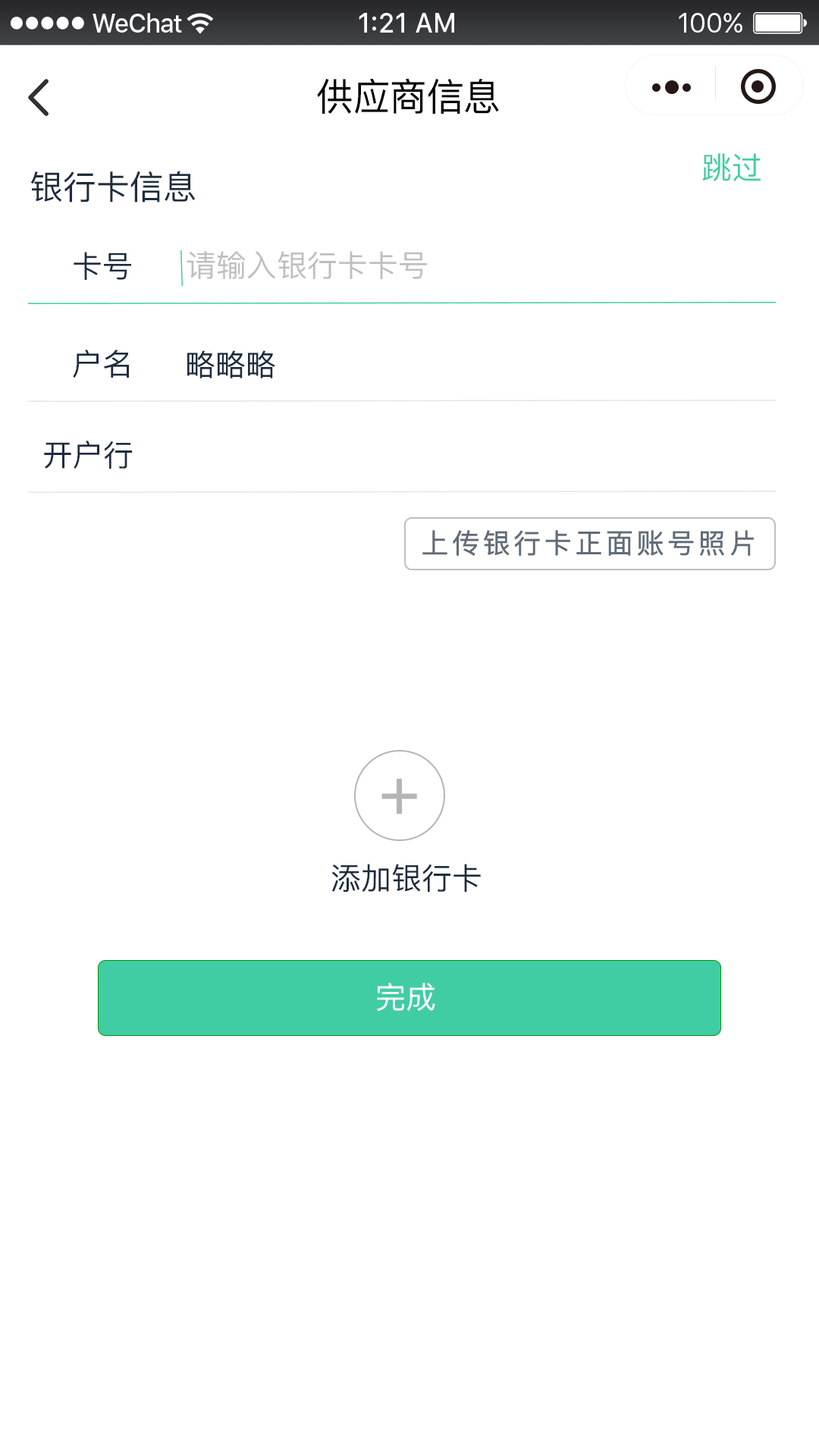
<style>
.page{position:relative;width:819px;height:1456px;background:#ffffff}
.page>*{position:absolute;margin:0}
.t1{font:37.9px "PingFangSC-Regular";color:#000000}
.t2{font:30.3px "PingFangSC-Regular";color:#40cda4}
.t3{font:33.4px "PingFangSC-Regular";color:#1e2c3e}
.t4{font:30.3px "PingFangSC-Regular";color:#1e2c3e}
.t5{font:30.3px "PingFangSC-Regular";color:#bfbfbf}
.t6{font:27.3px "PingFangSC-Regular";letter-spacing:0.1em;color:#626b78;font-weight:bold}
.t7{font:68.2px "PingFangSC-Regular";letter-spacing:0.1em;color:#b5b5b5;font-weight:bold}
.t8{font:30.3px "PingFangSC-Regular";color:#ffffff}
</style>
<div class="page">
<p class="t1" style="left:317px;top:78px;width:182px;height:36px">供应商信息</p>
<p class="t2" style="left:702px;top:153px;width:59px;height:29px">跳过</p>
<p class="t3" style="left:30px;top:171px;width:166px;height:31px">银行卡信息</p>
<p class="t4" style="left:74px;top:252px;width:57px;height:28px">卡号</p>
<p class="t5" style="left:187px;top:251px;width:240px;height:28px">请输入银行卡卡号</p>
<p class="t4" style="left:73px;top:350px;width:56px;height:28px">户名</p>
<p class="t4" style="left:187px;top:350px;width:88px;height:28px">略略略</p>
<p class="t4" style="left:44px;top:441px;width:88px;height:28px">开户行</p>
<p class="t6" style="left:422px;top:530px;width:332px;height:26px">上传银行卡正面账号照片</p>
<p class="t7" style="left:381px;top:779px;width:36px;height:35px">+</p>
<p class="t4" style="left:331px;top:864px;width:150px;height:29px">添加银行卡</p>
<p class="t8" style="left:377px;top:983px;width:58px;height:29px">完成</p>
</div>
